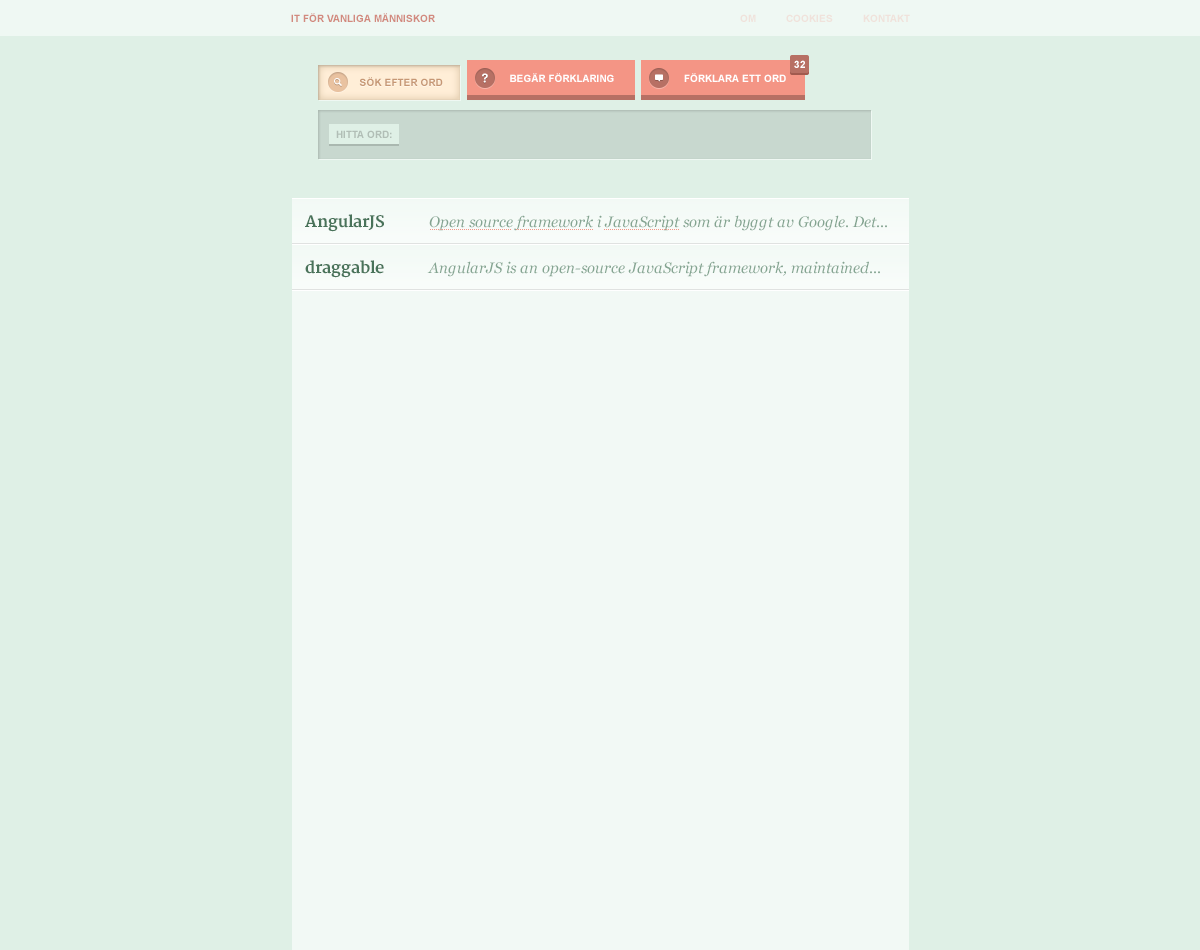
<style>
.page{position:relative;width:1200px;height:950px;background:#dff0e6}
.page>*{position:absolute;margin:0}
.t1{font:10px "Arial-BoldMT";color:#d28a7e;text-transform:uppercase}
.t2{font:10px "Arial-BoldMT";color:#f0e2db;text-transform:uppercase}
.t3{font:10px "Arial-BoldMT";color:#ffffff;text-transform:uppercase}
.t4{font:10px "Arial-BoldMT";color:#c69774;text-transform:uppercase}
.t5{font:10px "Arial-BoldMT";color:#fffefe;text-transform:uppercase}
.t6{font:10px "Arial-BoldMT";color:#b1beb6;text-transform:uppercase}
.t7{font:16px "Merriweather-Bold";color:#49735a}
.t8{font:15px "Georgia-Italic";color:#84a491}
</style>
<div class="page">
<p class="t1" style="left:291px;top:13px;width:144px;height:9px">IT för vanliga människor</p>
<p class="t2" style="left:740px;top:14px;width:170px;height:8px">OM          cookies          kontakt</p>
<p class="t3" style="left:794px;top:60px;width:11px;height:8px">32</p>
<p class="t4" style="left:359px;top:77px;width:84px;height:9px">Sök efter ord</p>
<p class="t5" style="left:510px;top:73px;width:104px;height:9px">Begär förklaring</p>
<p class="t5" style="left:684px;top:73px;width:102px;height:9px">Förklara ett ord</p>
<p class="t6" style="left:336px;top:130px;width:56px;height:8px">Hitta ord:</p>
<p class="t7" style="left:305px;top:214px;width:79px;height:18px">AngularJS</p>
<p class="t8" style="left:429px;top:215px;width:458px;height:16px">Open source framework i JavaScript som är byggt av Google. Det...</p>
<p class="t7" style="left:305px;top:260px;width:79px;height:18px">draggable</p>
<p class="t8" style="left:427px;top:261px;width:453px;height:16px">AngularJS is an open-source JavaScript framework, maintained...</p>
</div>
